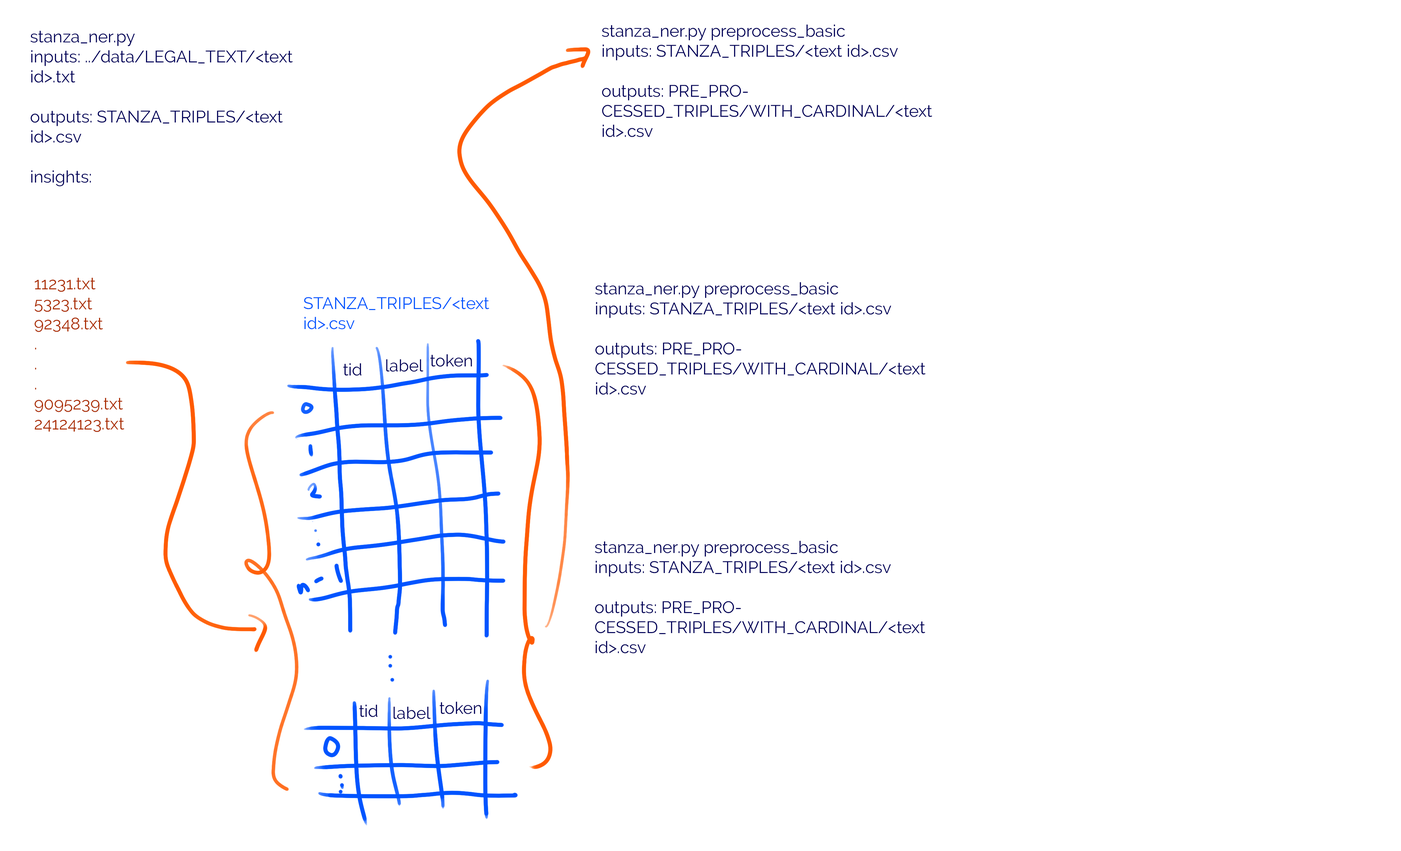
<style>
.page{position:relative;width:1401px;height:851px;background:#ffffff}
.page>*{position:absolute;margin:0}
.t1{font:16.7px "Raleway-Regular";color:#000059}
.t2{font:16.7px "Raleway-Regular";color:#aa2c00}
.t3{font:16.7px "Raleway-Regular";color:#0054ff}
</style>
<div class="page">
<p class="t1" style="left:602px;top:24px;width:331px;height:113px">stanza_ner.py preprocess_basic<br>inputs: STANZA_TRIPLES/&lt;text id&gt;.csv<br><br>outputs: PRE_PROCESSED_TRIPLES/WITH_CARDINAL/&lt;text id&gt;.csv</p>
<p class="t1" style="left:30px;top:31px;width:263px;height:156px">stanza_ner.py<br>inputs: ../data/LEGAL_TEXT/&lt;text id&gt;.txt<br><br>outputs: STANZA_TRIPLES/&lt;text id&gt;.csv<br><br>insights:</p>
<p class="t2" style="left:34px;top:278px;width:90px;height:154px">11231.txt<br>5323.txt<br>92348.txt<br>.<br>.<br>.<br>9095239.txt<br>24124123.txt</p>
<p class="t1" style="left:595px;top:282px;width:331px;height:113px">stanza_ner.py preprocess_basic<br>inputs: STANZA_TRIPLES/&lt;text id&gt;.csv<br><br>outputs: PRE_PROCESSED_TRIPLES/WITH_CARDINAL/&lt;text id&gt;.csv</p>
<p class="t3" style="left:304px;top:297px;width:185px;height:32px">STANZA_TRIPLES/&lt;text id&gt;.csv</p>
<p class="t1" style="left:343px;top:363px;width:19px;height:13px">tid</p>
<p class="t1" style="left:386px;top:359px;width:37px;height:13px">label</p>
<p class="t1" style="left:430px;top:354px;width:42px;height:13px">token</p>
<p class="t1" style="left:595px;top:541px;width:331px;height:112px">stanza_ner.py preprocess_basic<br>inputs: STANZA_TRIPLES/&lt;text id&gt;.csv<br><br>outputs: PRE_PROCESSED_TRIPLES/WITH_CARDINAL/&lt;text id&gt;.csv</p>
<p class="t1" style="left:440px;top:701px;width:41px;height:13px">token</p>
<p class="t1" style="left:359px;top:704px;width:19px;height:13px">tid</p>
<p class="t1" style="left:394px;top:706px;width:37px;height:13px">label</p>
</div>
